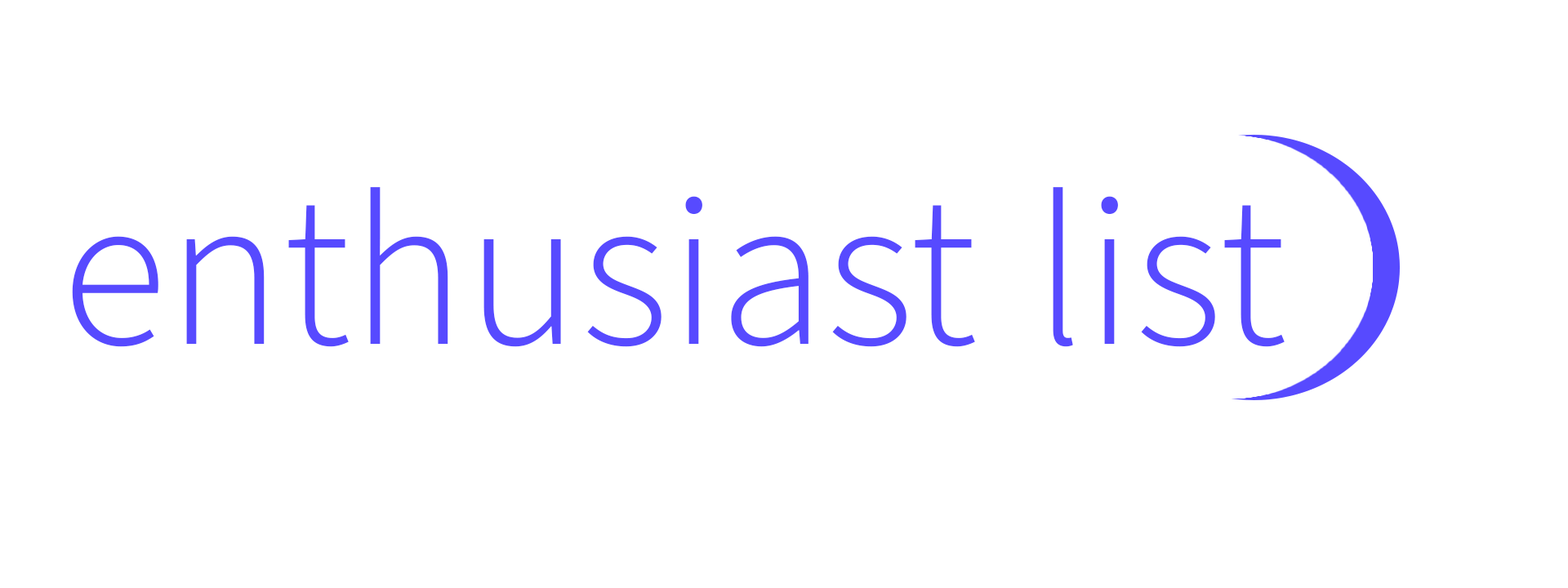
<style>
.page{position:relative;width:1568px;height:588px;background:#ffffff}
.page>*{position:absolute;margin:0}
.t1{font:217.8px "SourceSansRoman-Light";color:#574aff}
</style>
<div class="page">
<p class="t1" style="left:72px;top:187px;width:903px;height:160px">enthusiast</p>
<p class="t1" style="left:1053px;top:187px;width:232px;height:160px">list</p>
</div>
